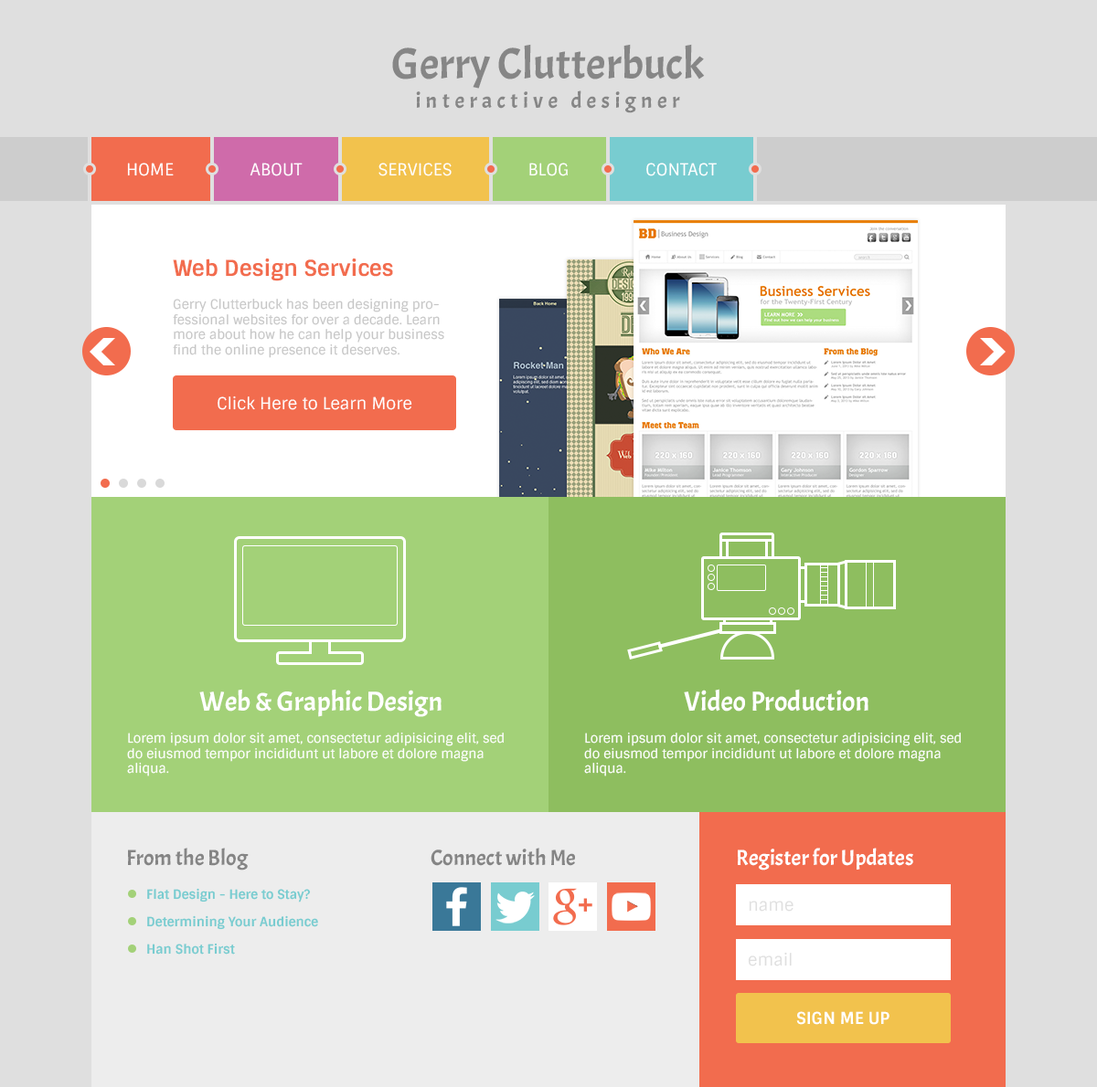
<style>
.page{position:relative;width:1097px;height:1087px;background:#dfdfdf}
.page>*{position:absolute;margin:0}
.t1{font:43.9px "Acme-Regular";color:#868686}
.t2{font:21.9px "Acme-Regular";letter-spacing:0.22em;color:#868686}
.t3{font:16.4px "Sintony";color:#ffffff}
.t4{font:21.9px "Sintony-Bold";color:#f26c4e}
.t5{font:12.8px "Sintony";color:#c6c6c6}
.t6{font:16.4px "Sintony";color:#fffefe}
.t7{font:27.4px "Acme-Regular";color:#ffffff}
.t8{font:12.8px "Sintony";color:#ffffff}
.t9{font:21.9px "Acme-Regular";color:#858585}
.t10{font:21.9px "Acme-Regular";color:#ffffff}
.t11{font:12.8px "Sintony-Bold";color:#78ccd0}
.t12{font:16.4px "Sintony";color:#dfdfdf}
.t13{font:16.4px "Sintony-Bold";color:#ffffff}
</style>
<div class="page">
<p class="t1" style="left:392px;top:44px;width:313px;height:45px">Gerry Clutterbuck</p>
<p class="t2" style="left:416px;top:90px;width:264px;height:23px">interactive designer</p>
<p class="t3" style="left:127px;top:163px;width:47px;height:13px">HOME</p>
<p class="t3" style="left:249px;top:163px;width:53px;height:13px">ABOUT</p>
<p class="t3" style="left:378px;top:163px;width:73px;height:13px">SERVICES</p>
<p class="t3" style="left:529px;top:163px;width:38px;height:13px">BLOG</p>
<p class="t3" style="left:646px;top:163px;width:70px;height:13px">CONTACT</p>
<p class="t4" style="left:173px;top:259px;width:220px;height:22px">Web Design Services</p>
<p class="t5" style="left:173px;top:298px;width:271px;height:60px">Gerry Clutterbuck has been designing professional websites for over a decade. Learn more about how he can help your business find the online presence it deserves.</p>
<p class="t6" style="left:217px;top:396px;width:195px;height:14px">Click Here to Learn More</p>
<p class="t7" style="left:199px;top:689px;width:242px;height:28px">Web &amp; Graphic Design</p>
<p class="t7" style="left:684px;top:689px;width:184px;height:23px">Video Production</p>
<p class="t8" style="left:127px;top:732px;width:377px;height:45px">Lorem ipsum dolor sit amet, consectetur adipisicing elit, sed do eiusmod tempor incididunt ut labore et dolore magna aliqua.</p>
<p class="t8" style="left:584px;top:732px;width:376px;height:45px">Lorem ipsum dolor sit amet, consectetur adipisicing elit, sed do eiusmod tempor incididunt ut labore et dolore magna aliqua.</p>
<p class="t9" style="left:128px;top:848px;width:121px;height:23px">From the Blog</p>
<p class="t9" style="left:430px;top:848px;width:145px;height:18px">Connect with Me</p>
<p class="t10" style="left:737px;top:848px;width:176px;height:23px">Register for Updates</p>
<p class="t11" style="left:147px;top:888px;width:164px;height:15px">Flat Design - Here to Stay?</p>
<p class="t12" style="left:748px;top:901px;width:45px;height:11px">name</p>
<p class="t11" style="left:147px;top:916px;width:171px;height:14px">Determining Your Audience</p>
<p class="t11" style="left:147px;top:943px;width:88px;height:12px">Han Shot First</p>
<p class="t12" style="left:747px;top:952px;width:44px;height:15px">email</p>
<p class="t13" style="left:796px;top:1012px;width:93px;height:13px">SIGN ME UP</p>
</div>
